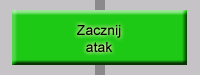
<style>
.page{position:relative;width:200px;height:75px;background:#1ec915}
.page>*{position:absolute;margin:0}
.t1{font:14px "ArialMT";color:#000000}
</style>
<div class="page">
<p class="t1" style="left:77px;top:25px;width:44px;height:27px;text-align:center">Zacznij<br>atak</p>
</div>
